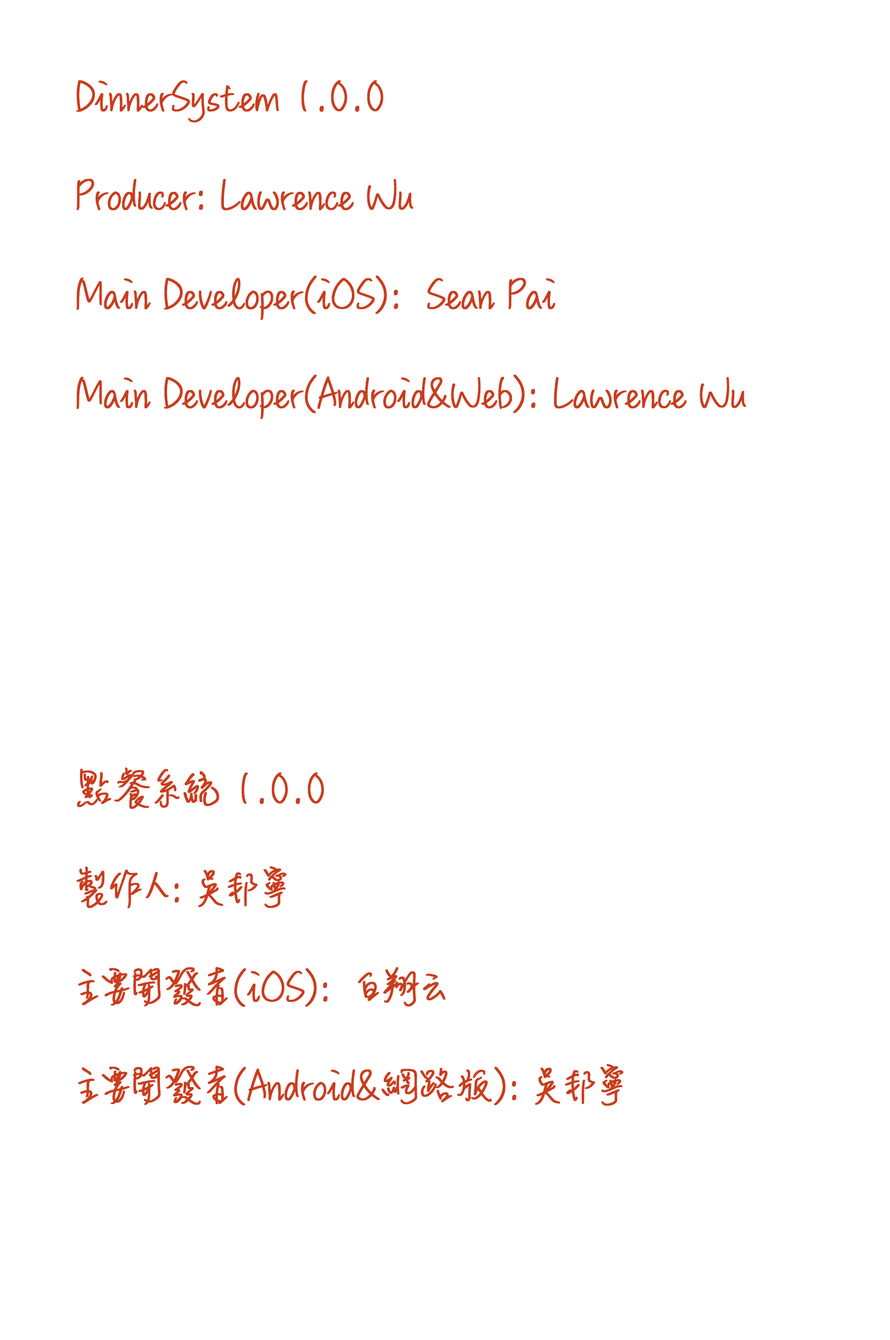
<style>
.page{position:relative;width:890px;height:1340px;background:#ffffff}
.page>*{position:absolute;margin:0}
.t1{font:46px/49.5px "MLingWaiMedium-TC";letter-spacing:-0.014em;color:#ca3c1b;font-weight:bold;scale:0.92 1}
</style>
<div class="page">
<p class="t1" style="left:76px;top:80px;width:671px;height:1025px">DinnerSystem 1.0.0<br><br>Producer: Lawrence Wu<br><br>Main Developer(iOS):  Sean Pai<br><br>Main Developer(Android&amp;Web): Lawrence Wu<br><br><br><br><br><br><br><br>點餐系統 1.0.0<br><br>製作人: 吳邦寧<br><br>主要開發者(iOS):  白翔云<br><br>主要開發者(Android&amp;網路版): 吳邦寧</p>
</div>
